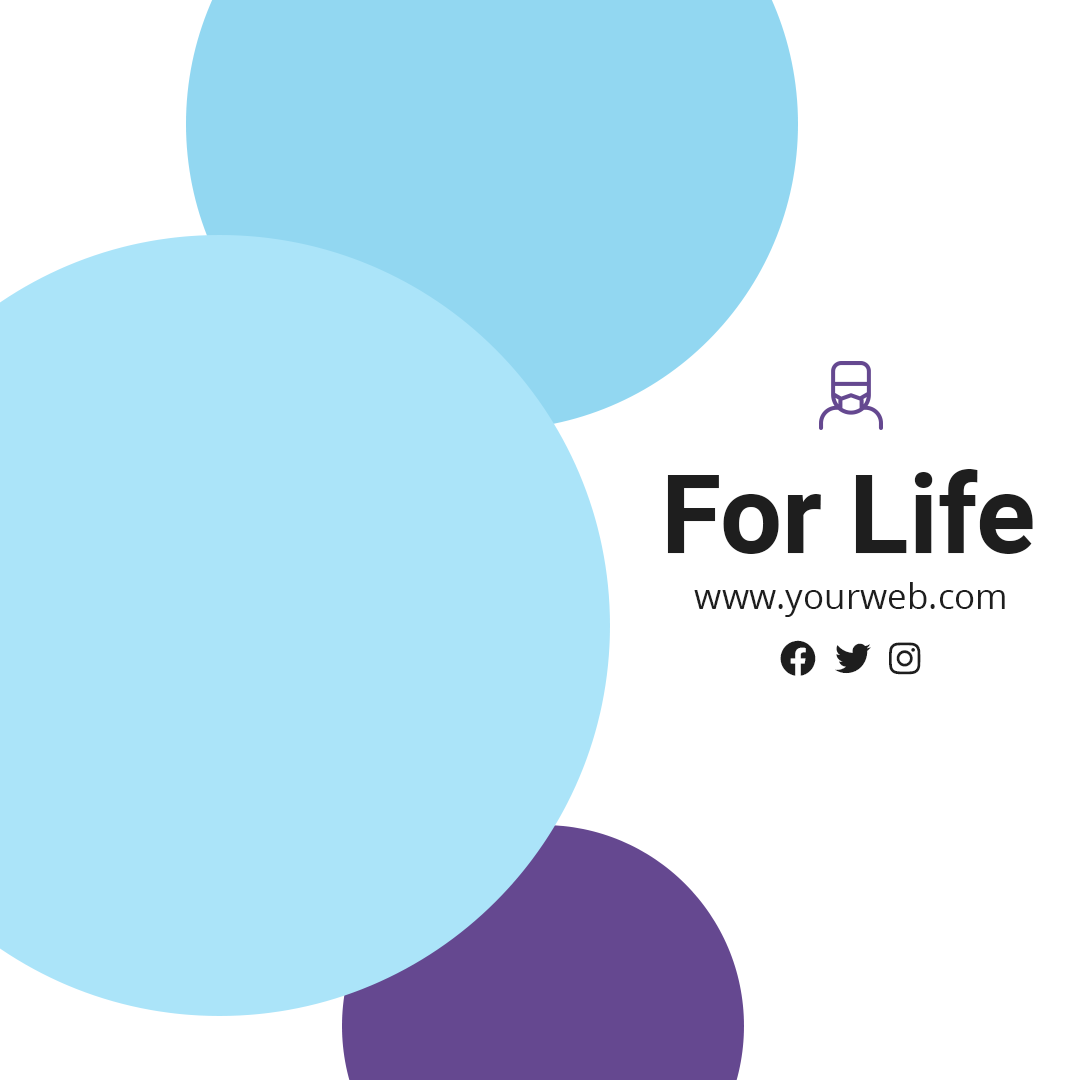
<style>
.page{position:relative;width:1080px;height:1080px;background:#ffffff}
.page>*{position:absolute;margin:0}
.t1{font:110px "Roboto-Bold";color:#1e1e1e}
.t2{font:35px "OpenSans-Regular";color:#1e1e1e}
</style>
<div class="page">
<p class="t1" style="left:667px;top:469px;width:366px;height:85px">For Life</p>
<p class="t2" style="left:694px;top:582px;width:311px;height:35px">www.yourweb.com</p>
</div>
